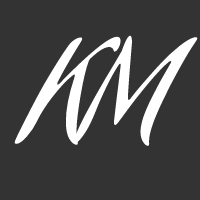
<style>
.page{position:relative;width:200px;height:200px;background:#333333}
.page>*{position:absolute;margin:0}
.t1{font:130.8px "AguafinaScript-Regular";color:#ffffff}
</style>
<div class="page">
<p class="t1" style="left:14px;top:35px;width:184px;height:111px">KM</p>
</div>
